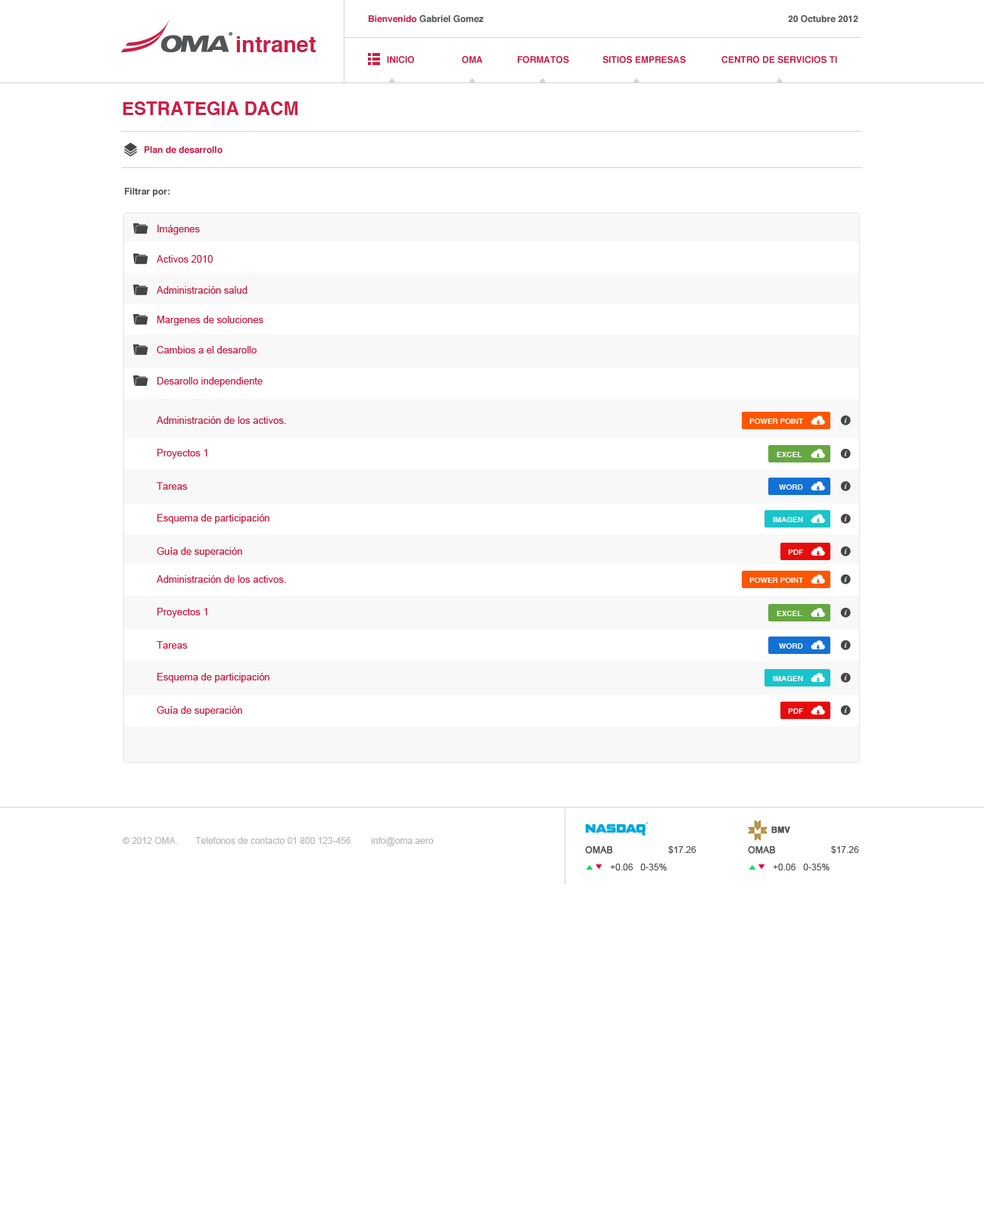
<style>
.page{position:relative;width:984px;height:1211px;background:#ffffff}
.page>*{position:absolute;margin:0}
.t1{font:9.1px "Helvetica-Bold";color:#515355}
.t2{font:9.1px "Helvetica-Bold";color:#c91f46}
.t3{font:22px "Helvetica-Bold";color:#c91f46}
.t4{font:9.1px "Helvetica-Bold";color:#c91f46;text-transform:uppercase}
.t5{font:18.2px "Helvetica-Bold";color:#c91f46;text-transform:uppercase}
.t6{font:9.8px "ArialMT";color:#c91f46}
.t7{font:7.6px "Helvetica-Bold";color:#ffffff;text-transform:uppercase}
.t8{font:8.2px "Helvetica-Bold";color:#515355;font-weight:bold}
.t9{font:9.1px "ArialMT";color:#b9b9b9}
.t10{font:9.1px "ArialMT";color:#515355;font-weight:bold}
.t11{font:9.1px "ArialMT";color:#515355}
</style>
<div class="page">
<p class="t1" style="left:369px;top:15px;width:115px;height:8px"><span class="t2">Bienvenido</span> Gabriel Gomez</p>
<p class="t1" style="left:788px;top:15px;width:71px;height:8px">20 Octubre 2012</p>
<p class="t3" style="left:236px;top:36px;width:80px;height:16px">intranet</p>
<p class="t2" style="left:387px;top:56px;width:27px;height:8px">INICIO</p>
<p class="t2" style="left:462px;top:56px;width:21px;height:8px">OMA</p>
<p class="t4" style="left:518px;top:56px;width:51px;height:8px">formatos</p>
<p class="t4" style="left:603px;top:56px;width:83px;height:8px">sitios empresas</p>
<p class="t4" style="left:722px;top:56px;width:115px;height:8px">centro de servicios ti</p>
<p class="t5" style="left:123px;top:101px;width:175px;height:14px">Estrategia DACM</p>
<p class="t2" style="left:145px;top:146px;width:78px;height:8px">Plan de desarrollo</p>
<p class="t1" style="left:125px;top:188px;width:45px;height:9px">Filtrar por:</p>
<p class="t6" style="left:157px;top:225px;width:43px;height:10px">Imágenes</p>
<p class="t6" style="left:157px;top:255px;width:56px;height:8px">Activos 2010</p>
<p class="t6" style="left:157px;top:286px;width:91px;height:8px">Administración salud</p>
<p class="t6" style="left:157px;top:316px;width:106px;height:10px">Margenes de soluciones</p>
<p class="t6" style="left:157px;top:346px;width:100px;height:8px">Cambios a el desarollo</p>
<p class="t6" style="left:157px;top:377px;width:106px;height:10px">Desarollo independiente</p>
<p class="t6" style="left:157px;top:416px;width:129px;height:8px">Administración de los activos.</p>
<p class="t7" style="left:750px;top:419px;width:54px;height:5px">Power point</p>
<p class="t6" style="left:157px;top:449px;width:50px;height:10px">Proyectos 1</p>
<p class="t7" style="left:777px;top:452px;width:26px;height:5px">excel</p>
<p class="t6" style="left:157px;top:482px;width:31px;height:8px">Tareas</p>
<p class="t7" style="left:779px;top:485px;width:24px;height:5px">word</p>
<p class="t6" style="left:157px;top:514px;width:113px;height:10px">Esquema de participación</p>
<p class="t7" style="left:773px;top:517px;width:30px;height:5px">Imagen</p>
<p class="t6" style="left:157px;top:547px;width:85px;height:10px">Guía de superación</p>
<p class="t7" style="left:788px;top:550px;width:15px;height:5px">PDF</p>
<p class="t6" style="left:157px;top:575px;width:129px;height:8px">Administración de los activos.</p>
<p class="t7" style="left:750px;top:578px;width:54px;height:5px">Power point</p>
<p class="t6" style="left:157px;top:608px;width:50px;height:10px">Proyectos 1</p>
<p class="t7" style="left:777px;top:611px;width:26px;height:5px">excel</p>
<p class="t6" style="left:157px;top:641px;width:31px;height:8px">Tareas</p>
<p class="t7" style="left:779px;top:644px;width:24px;height:5px">word</p>
<p class="t6" style="left:157px;top:673px;width:113px;height:10px">Esquema de participación</p>
<p class="t7" style="left:773px;top:676px;width:30px;height:5px">Imagen</p>
<p class="t6" style="left:157px;top:706px;width:85px;height:10px">Guía de superación</p>
<p class="t7" style="left:788px;top:709px;width:15px;height:5px">PDF</p>
<p class="t8" style="left:772px;top:827px;width:18px;height:7px">BMV</p>
<p class="t9" style="left:122px;top:837px;width:312px;height:10px">© 2012 OMA.       Telefonos de contacto 01 800 123-456        info@oma.aero</p>
<p class="t10" style="left:585px;top:847px;width:28px;height:7px">OMAB</p>
<p class="t11" style="left:669px;top:847px;width:28px;height:7px">$17.26</p>
<p class="t10" style="left:748px;top:847px;width:27px;height:7px">OMAB</p>
<p class="t11" style="left:831px;top:847px;width:28px;height:7px">$17.26</p>
<p class="t11" style="left:610px;top:864px;width:57px;height:7px">+0.06   0-35%</p>
<p class="t11" style="left:773px;top:864px;width:57px;height:7px">+0.06   0-35%</p>
</div>
